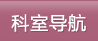
<style>
.page{position:relative;width:98px;height:41px}
.page>*{position:absolute;margin:0}
.t1{font:18px "MicrosoftYaHei";letter-spacing:0.05em;color:#ffffff}
</style>
<div class="page">
<p class="t1" style="left:11px;top:14px;width:75px;height:18px">科室导航</p>
</div>
